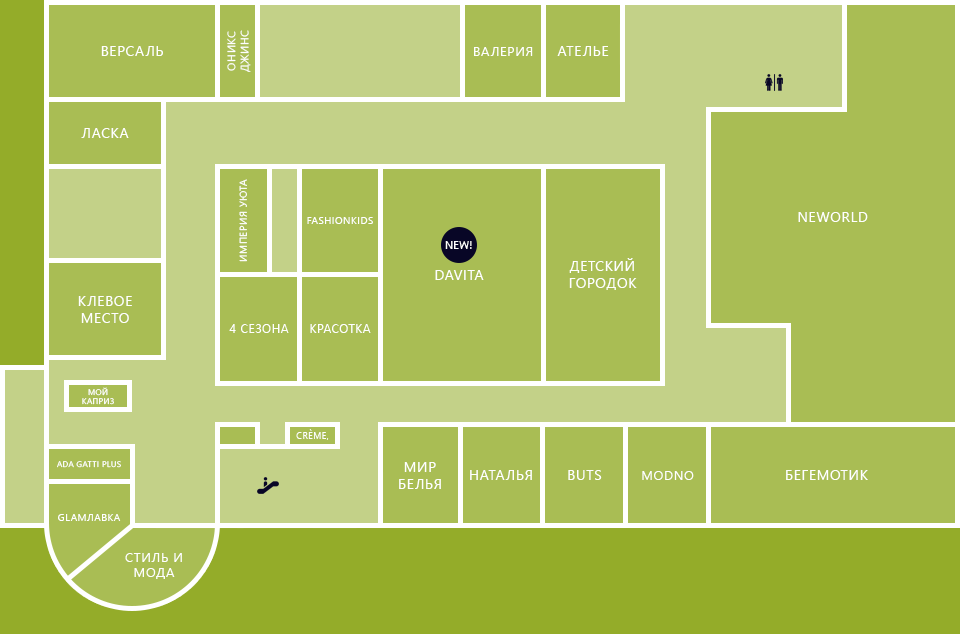
<style>
.page{position:relative;width:960px;height:634px;background:#a9bd54}
.page>*{position:absolute;margin:0}
.t1{font:11px "SegoeUI";letter-spacing:0.05em;color:#ffffff;text-transform:uppercase}
.t2{font:14px "SegoeUI";letter-spacing:0.05em;color:#ffffff;text-transform:uppercase}
.t3{font:13px "SegoeUI";letter-spacing:0.05em;color:#ffffff;text-transform:uppercase}
.t4{font:10px "SegoeUI";letter-spacing:0.05em;color:#ffffff;text-transform:uppercase}
.t5{font:11px "SegoeUI";color:#ffffff;text-transform:uppercase}
.t6{font:12px "SegoeUI";letter-spacing:0.05em;color:#ffffff;text-transform:uppercase}
.t7{font:8px "SegoeUI";letter-spacing:0.05em;color:#ffffff;text-transform:uppercase}
.t8{font:9px "SegoeUI";letter-spacing:0.05em;color:#ffffff;text-transform:uppercase}
</style>
<div class="page">
<p class="t1" style="left:227px;top:30px;width:24px;height:42px;text-align:center;rotate:-90deg">Оникс<br>Джинс</p>
<p class="t2" style="left:101px;top:46px;width:62px;height:10px">Версаль</p>
<p class="t3" style="left:474px;top:47px;width:59px;height:9px">Валерия</p>
<p class="t2" style="left:557px;top:46px;width:52px;height:10px">Ателье</p>
<p class="t2" style="left:81px;top:128px;width:48px;height:10px">Ласка</p>
<p class="t4" style="left:239px;top:179px;width:8px;height:83px;rotate:-90deg">Империя уюта</p>
<p class="t4" style="left:307px;top:217px;width:66px;height:7px">Fashionkids</p>
<p class="t2" style="left:798px;top:212px;width:70px;height:10px">NeWorld</p>
<p class="t5" style="left:445px;top:241px;width:27px;height:8px">New!</p>
<p class="t2" style="left:435px;top:270px;width:49px;height:10px">DaVita</p>
<p class="t2" style="left:569px;top:258px;width:68px;height:32px;text-align:center">Детский<br>городок</p>
<p class="t2" style="left:78px;top:296px;width:54px;height:27px;text-align:center">Клевое<br>место</p>
<p class="t6" style="left:229px;top:324px;width:60px;height:9px">4 сезона</p>
<p class="t6" style="left:310px;top:324px;width:61px;height:9px">Красотка</p>
<p class="t7" style="left:82px;top:387px;width:32px;height:18px;text-align:center">Мой<br>каприз</p>
<p class="t8" style="left:296px;top:429px;width:33px;height:11px">Crème,</p>
<p class="t7" style="left:57px;top:461px;width:64px;height:7px">Ada gatti plus</p>
<p class="t2" style="left:399px;top:462px;width:42px;height:27px;text-align:center">Мир<br>белья</p>
<p class="t2" style="left:470px;top:470px;width:62px;height:10px">Наталья</p>
<p class="t2" style="left:568px;top:470px;width:34px;height:10px">Buts</p>
<p class="t3" style="left:642px;top:471px;width:52px;height:9px">MODNO</p>
<p class="t2" style="left:786px;top:470px;width:82px;height:10px">Бегемотик</p>
<p class="t4" style="left:58px;top:514px;width:63px;height:7px">Glamлавка</p>
<p class="t3" style="left:125px;top:553px;width:57px;height:26px;text-align:center">Стиль и<br>мода</p>
</div>
